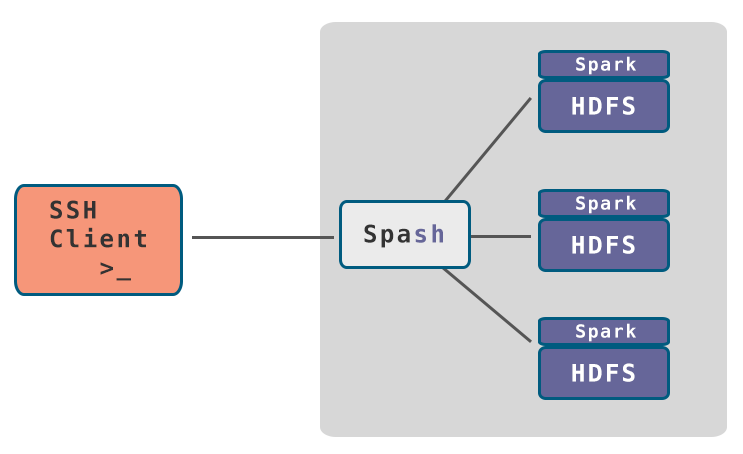
<style>
.page{position:relative;width:743px;height:454px;background:#ffffff}
.page>*{position:absolute;margin:0}
.t1{font:18px "Menlo-Bold";letter-spacing:0.1em;color:#ffffff}
.t2{font:24px "Menlo-Bold";letter-spacing:0.1em;color:#ffffff}
.t3{font:24px "Menlo-Bold";letter-spacing:0.1em;color:#333333}
.t4{font:24px "Menlo-Bold";letter-spacing:0.1em;color:#666699}
</style>
<div class="page">
<p class="t1" style="left:576px;top:56px;width:60px;height:19px">Spark</p>
<p class="t2" style="left:572px;top:96px;width:63px;height:19px">HDFS</p>
<p class="t1" style="left:576px;top:195px;width:60px;height:19px">Spark</p>
<p class="t3" style="left:50px;top:200px;width:96px;height:81px">SSH<br>Client<br>   &gt;_</p>
<p class="t3" style="left:364px;top:224px;width:79px;height:24px">Spa<span class="t4">sh</span></p>
<p class="t2" style="left:572px;top:235px;width:63px;height:19px">HDFS</p>
<p class="t1" style="left:576px;top:323px;width:60px;height:19px">Spark</p>
<p class="t2" style="left:572px;top:363px;width:63px;height:19px">HDFS</p>
</div>
